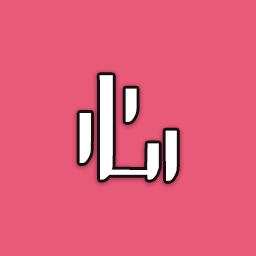
<style>
.page{position:relative;width:256px;height:256px;background:#e95a79}
.page>*{position:absolute;margin:0}
.t1{font:124px "ZCOOLXiaoWei-Regular";color:#ffffff}
</style>
<div class="page">
<p class="t1" style="left:79px;top:75px;width:98px;height:106px">心</p>
</div>
